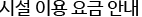
<style>
.page{position:relative;width:142px;height:17px;background:#ffffff}
.page>*{position:absolute;margin:0}
.t1{font:18px "NanumBarunGothic";color:#000000}
</style>
<div class="page">
<p class="t1" style="left:0px;top:0px;width:138px;height:16px">시설 이용 요금 안내</p>
</div>
